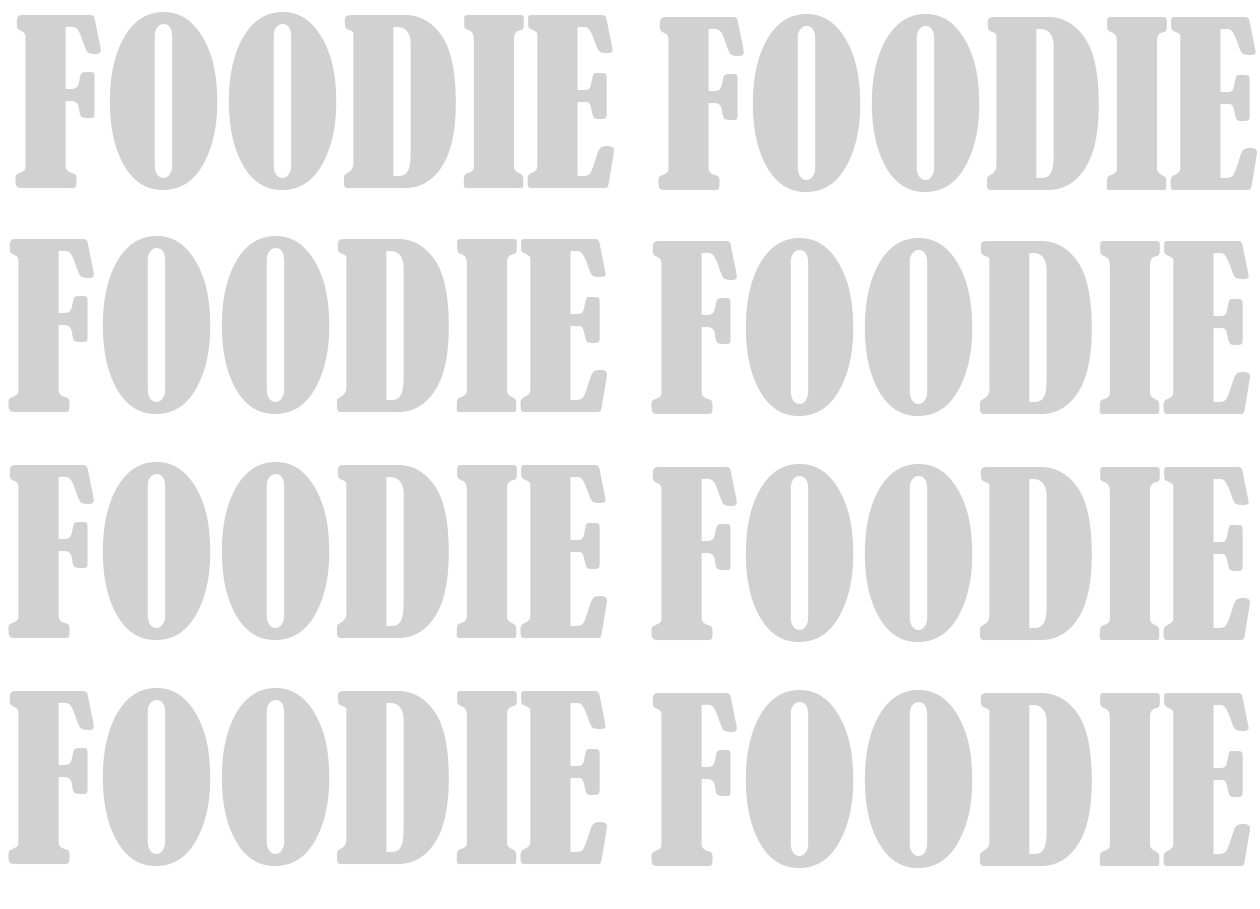
<style>
.page{position:relative;width:1260px;height:909px;background:#ffffff}
.page>*{position:absolute;margin:0}
.t1{font:220px "BernardMT-Condensed";color:#d1d1d1}
</style>
<div class="page">
<p class="t1" style="left:15px;top:12px;width:599px;height:178px">FOODIE</p>
<p class="t1" style="left:658px;top:14px;width:599px;height:178px">FOODIE</p>
<p class="t1" style="left:8px;top:236px;width:599px;height:178px">FOODIE</p>
<p class="t1" style="left:651px;top:238px;width:599px;height:178px">FOODIE</p>
<p class="t1" style="left:8px;top:462px;width:599px;height:178px">FOODIE</p>
<p class="t1" style="left:651px;top:464px;width:599px;height:178px">FOODIE</p>
<p class="t1" style="left:8px;top:688px;width:599px;height:178px">FOODIE</p>
<p class="t1" style="left:651px;top:690px;width:599px;height:178px">FOODIE</p>
</div>
